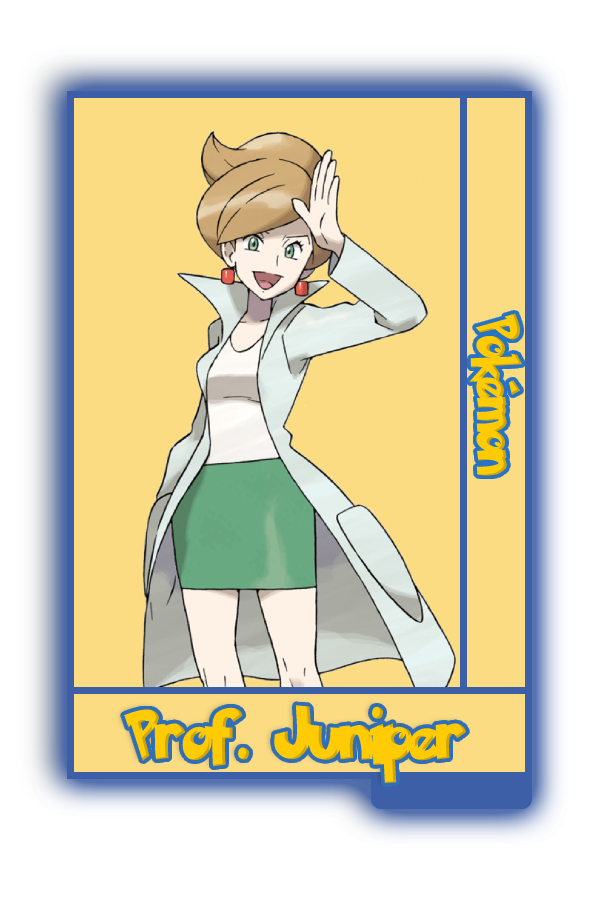
<style>
.page{position:relative;width:600px;height:900px;background:#fbdc83}
.page>*{position:absolute;margin:0}
.t1{font:48.8px "PokemonSolidNormal";color:#ffcb05;scale:0.8 1}
.t2{font:56.6px "PokemonSolidNormal";color:#ffcb05;scale:0.92 1}
</style>
<div class="page">
<p class="t1" style="left:469px;top:313px;width:54px;height:163px;rotate:90deg">Pokémon</p>
<p class="t2" style="left:124px;top:705px;width:343px;height:78px">Prof. Juniper</p>
</div>
